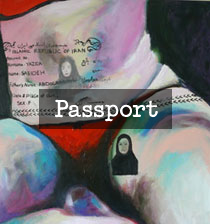
<style>
.page{position:relative;width:210px;height:224px}
.page>*{position:absolute;margin:0}
.t1{font:22px "Passport";color:#ffffff}
</style>
<div class="page">
<p class="t1" style="left:55px;top:99px;width:103px;height:23px">Passport</p>
</div>
